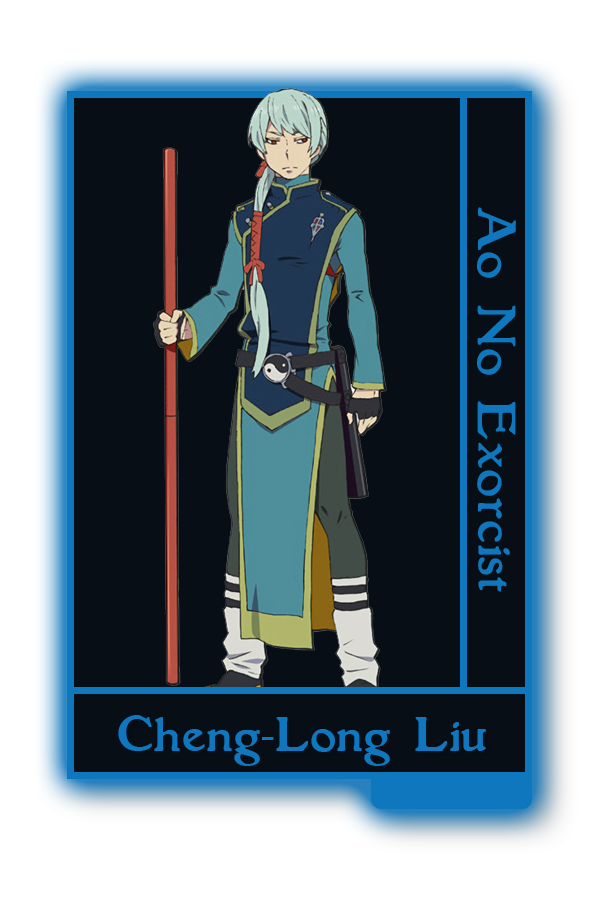
<style>
.page{position:relative;width:600px;height:900px;background:#070e16}
.page>*{position:absolute;margin:0}
.t1{font:48.8px "Grantham-Roman";color:#0f77be}
.t2{font:45.6px "Grantham-Roman";color:#0f77be}
.t3{font:45.6px "MyriadPro-Regular";color:#0f77be}
</style>
<div class="page">
<p class="t1" style="left:477px;top:207px;width:39px;height:385px;rotate:90deg">Ao No Exorcist</p>
<p class="t2" style="left:118px;top:715px;width:369px;height:51px">Cheng<span class="t3">-</span>Long Liu</p>
</div>
